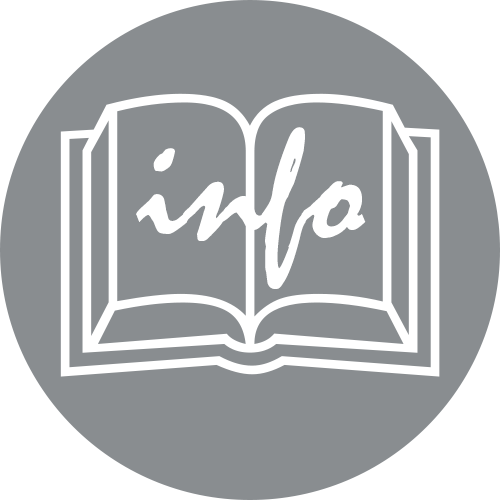
<style>
.page{position:relative;width:500px;height:500px;background:#898d90}
.page>*{position:absolute;margin:0}
.t1{font:170.7px "Mistral";letter-spacing:-0.003em;color:#ffffff}
</style>
<div class="page">
<p class="t1" style="left:136px;top:127px;width:230px;height:162px">info</p>
</div>
